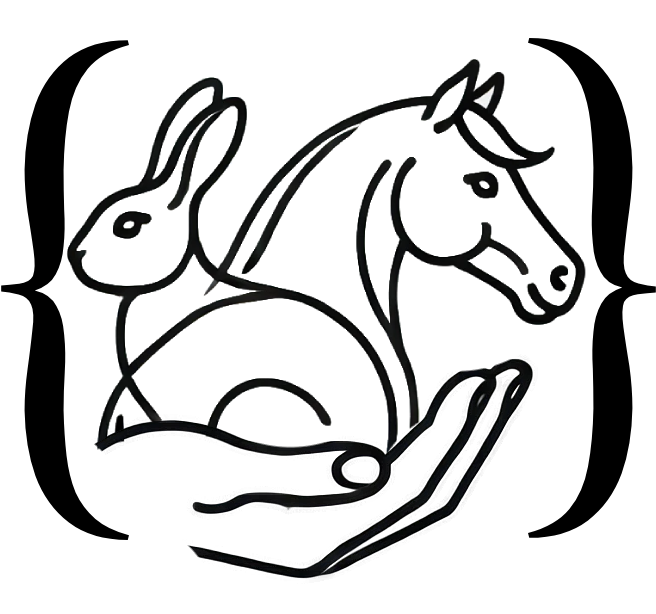
<style>
.page{position:relative;width:656px;height:614px;background:#ffffff}
.page>*{position:absolute;margin:0}
.t1{font:600px "Cinzel-Regular";color:#000000}
</style>
<div class="page">
<p class="t1" style="left:1px;top:40px;width:128px;height:500px">{</p>
<p class="t1" style="left:528px;top:38px;width:128px;height:500px;rotate:-180deg">{</p>
</div>
